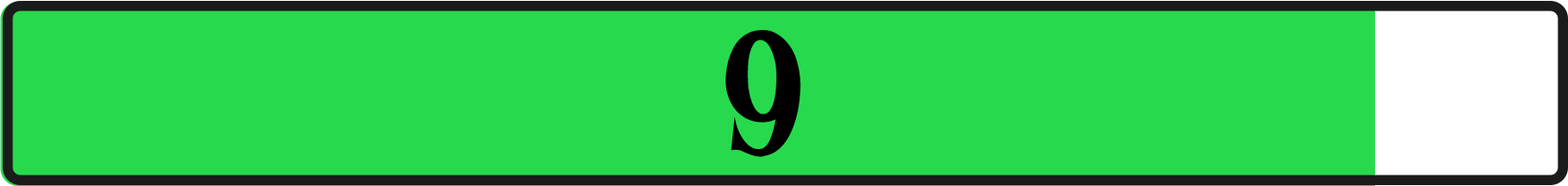
<style>
.page{position:relative;width:1568px;height:186px;background:#27da4d}
.page>*{position:absolute;margin:0}
.t1{font:160.7px "Cageworld-Regular";letter-spacing:0.005em;color:#000000}
</style>
<div class="page">
<p class="t1" style="left:725px;top:30px;width:76px;height:127px">9</p>
</div>
